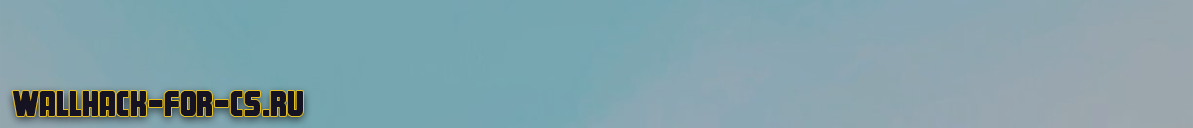
<style>
.page{position:relative;width:1193px;height:128px}
.page>*{position:absolute;margin:0}
.t1{font:36px "AA-Magnum";color:#151322}
</style>
<div class="page">
<p class="t1" style="left:12px;top:91px;width:291px;height:25px">Wallhack-for-cs.ru</p>
</div>
